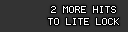
<style>
.page{position:relative;width:128px;height:32px;background:#333333}
.page>*{position:absolute;margin:0}
.t1{font:8px/12px "Terminal";color:#ffffff}
</style>
<div class="page">
<p class="t1" style="left:48px;top:6px;width:71px;height:19px;text-align:center">2 MORE HITS<br>TO LITE LOCK</p>
</div>
